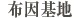
<style>
.page{position:relative;width:79px;height:18px;background:#ffffff}
.page>*{position:absolute;margin:0}
.t1{font:18px "RyuminPr6N-ExBold";color:#4c4843;scale:0.9 1}
</style>
<div class="page">
<p class="t1" style="left:8px;top:0px;width:64px;height:18px">布因基地</p>
</div>
